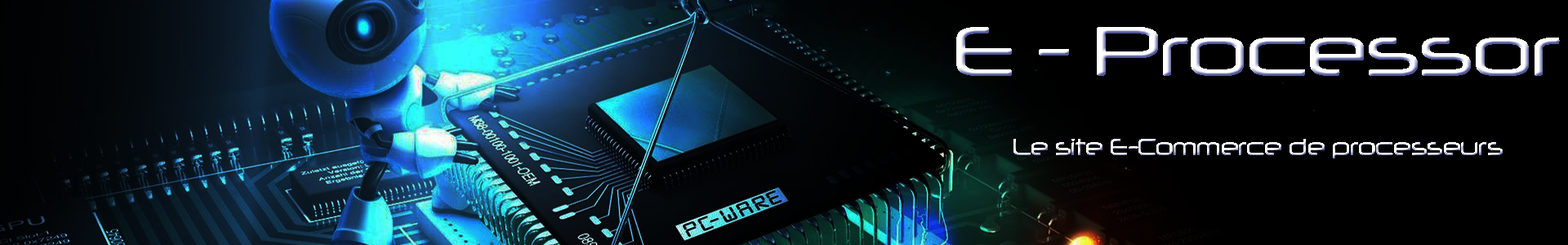
<style>
.page{position:relative;width:1568px;height:245px;background:#000000}
.page>*{position:absolute;margin:0}
.t1{font:67.8px "Neuropol-Regular"}
.t2{font:22.9px "Neuropol-Regular";scale:0.89 1}
</style>
<div class="page">
<p class="t1" style="left:956px;top:27px;width:604px;height:49px">E - Processor</p>
<p class="t2" style="left:1013px;top:139px;width:490px;height:19px">Le site E-Commerce de processeurs</p>
</div>
